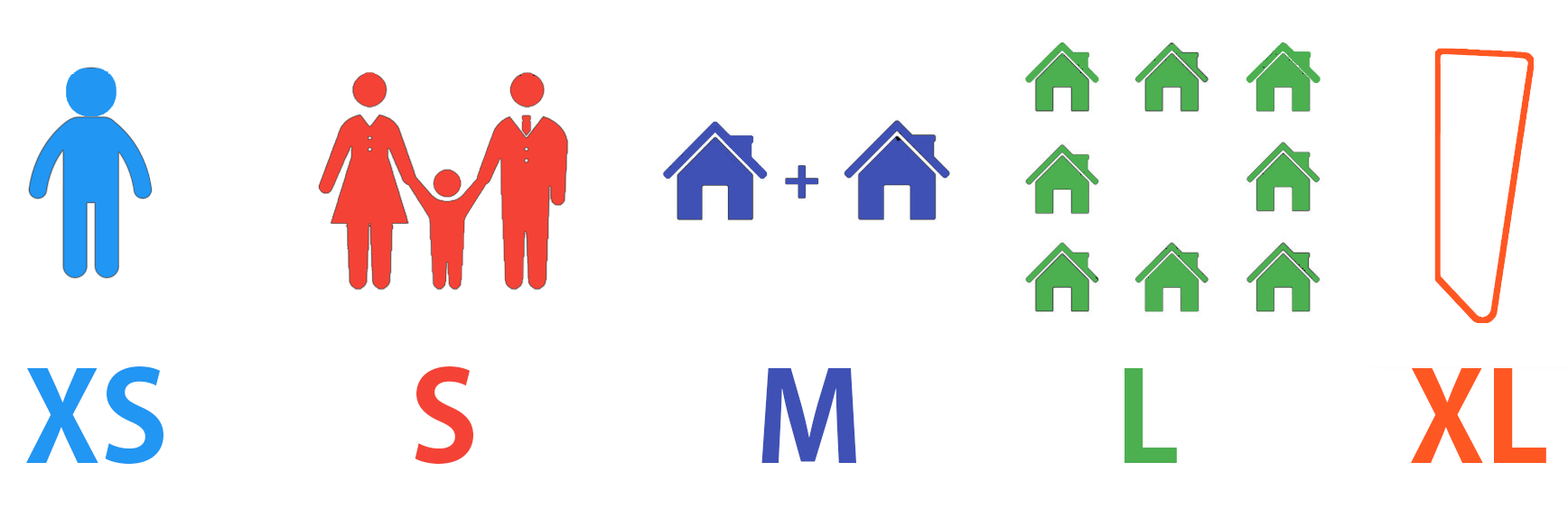
<style>
.page{position:relative;width:1568px;height:527px;background:#ffffff}
.page>*{position:absolute;margin:0}
.t1{font:44.2px "AdobeGothicStd-Bold";color:#2196f3}
.t2{font:44.2px "AdobeGothicStd-Bold";color:#f44336}
.t3{font:44.2px "AdobeGothicStd-Bold";color:#3f51b5}
.t4{font:44.2px "AdobeGothicStd-Bold";color:#4caf50}
.t5{font:44.2px "AdobeGothicStd-Bold";color:#ff5722}
</style>
<div class="page">
<p class="t1" style="left:26px;top:367px;width:137px;height:97px">XS</p>
<p class="t2" style="left:415px;top:367px;width:58px;height:97px">S</p>
<p class="t3" style="left:761px;top:369px;width:95px;height:94px">M</p>
<p class="t4" style="left:1125px;top:369px;width:52px;height:94px">L</p>
<p class="t5" style="left:1411px;top:369px;width:135px;height:94px">XL</p>
</div>
